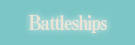
<style>
.page{position:relative;width:135px;height:45px;background:#7dc6c6}
.page>*{position:absolute;margin:0}
.t1{font:20px "RyuminPro-ExBold";letter-spacing:-0.08em;color:#f1e6d8;scale:0.9 1}
</style>
<div class="page">
<p class="t1" style="left:28px;top:15px;width:79px;height:18px">Battleships</p>
</div>
